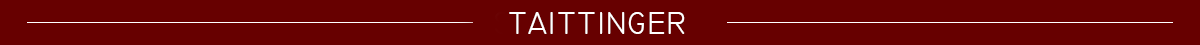
<style>
.page{position:relative;width:1200px;height:45px;background:#670000}
.page>*{position:absolute;margin:0}
.t1{font:32.1px "Technic";color:#ffffff}
</style>
<div class="page">
<p class="t1" style="left:509px;top:12px;width:176px;height:22px">TAITTINGER</p>
</div>
